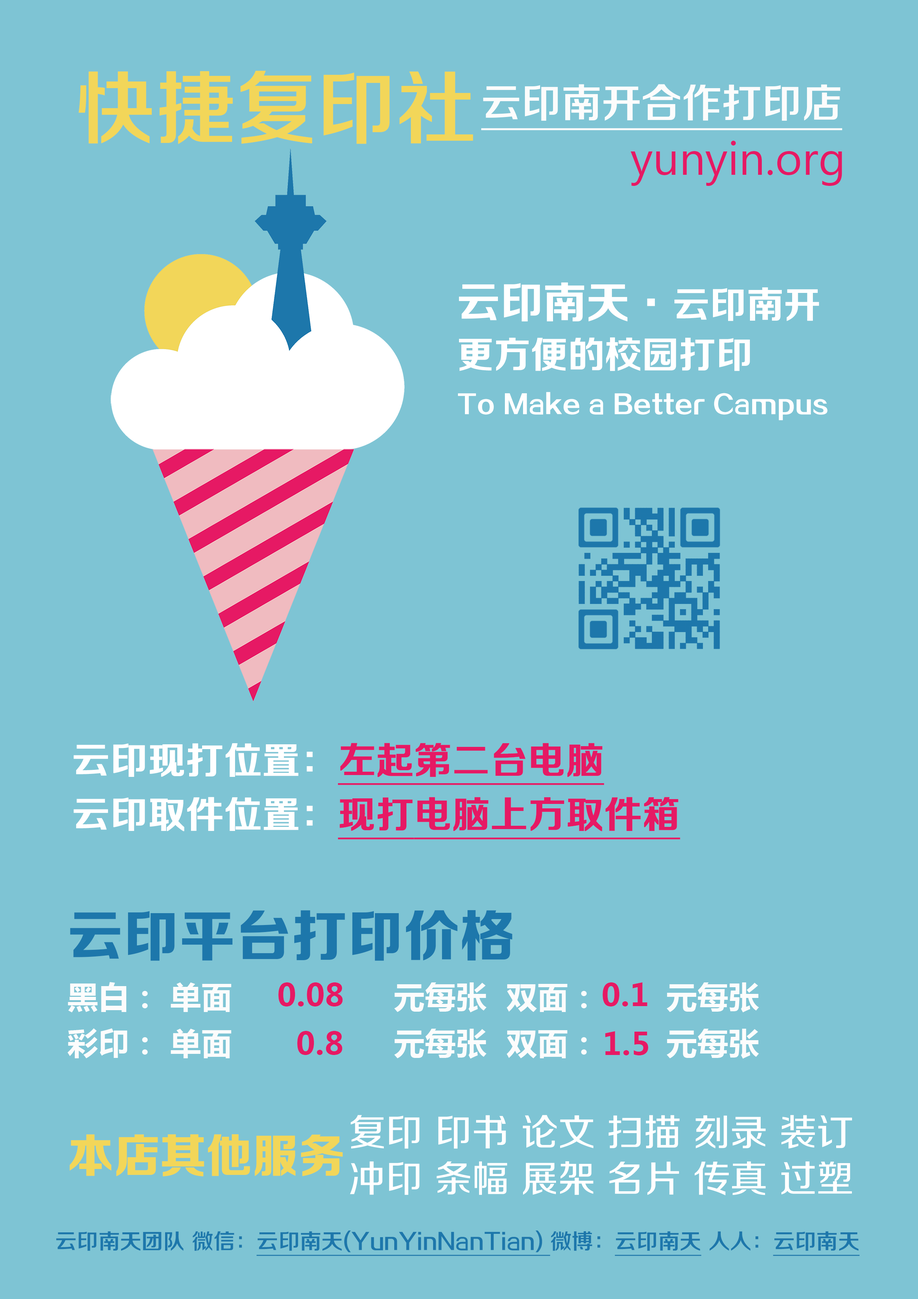
<style>
.page{position:relative;width:918px;height:1299px;background:#7ec4d4}
.page>*{position:absolute;margin:0}
.t1{font:80.2px "FZZZHONGJW--GB1-0";color:#f2d659}
.t2{font:40.1px "FZZZHONGJW--GB1-0";color:#fcfcfc;text-decoration:underline}
.t3{font:46.3px "KhmerUI";color:#e61964}
.t4{font:24.7px/55.5px "FZZCHJW--GB1-0";color:#ffffff}
.t5{font:43.2px/55.5px "FZZCHJW--GB1-0";color:#ffffff}
.t6{font:37px/55.5px "FZZCHJW--GB1-0";color:#ffffff}
.t7{font:37px "FZZZHONGJW--GB1-0";color:#ffffff;font-weight:bold}
.t8{font:37px "FZZZHONGJW--GB1-0";color:#e61964;font-weight:bold;text-decoration:underline}
.t9{font:30.9px "MicrosoftYaHei-Bold";letter-spacing:0.01em;color:#e61964}
.t10{font:37px/46.3px "FZZZHUNHJW--GB1-0";color:#ffffff}
.t11{font:46.3px "FZZDHJW--GB1-0";color:#f2d659}
.t12{font:21.6px "FZZZHONGJW--GB1-0";color:#1d77ab;text-decoration:underline}
.t13{font:21.6px "FZZZHONGJW--GB1-0";color:#1d77ab}
</style>
<div class="page">
<p class="t1" style="left:78px;top:71px;width:395px;height:73px">快捷复印社</p>
<p class="t2" style="left:481px;top:84px;width:362px;height:46px">云印南开合作打印店</p>
<p class="t3" style="left:630px;top:141px;width:212px;height:45px">yunyin.org</p>
<p class="t4" style="left:458px;top:282px;width:370px;height:138px"><span class="t5">云印南天·</span><span class="t6">云印南开<br>更方便的校园打印<br></span>To Make a Better Campus</p>
<p class="t7" style="left:74px;top:743px;width:530px;height:42px">云印现打位置：<span class="t8">左起第二台电脑</span></p>
<p class="t8" style="left:74px;top:797px;width:606px;height:42px"><span class="t7">云印取件位置：</span>现打电脑上方取件箱</p>
<p class="t9" style="left:278px;top:982px;width:65px;height:24px">0.08</p>
<p class="t9" style="left:603px;top:982px;width:45px;height:24px">0.1</p>
<p class="t9" style="left:297px;top:1031px;width:45px;height:24px">0.8</p>
<p class="t9" style="left:605px;top:1031px;width:43px;height:24px">1.5</p>
<p class="t10" style="left:350px;top:1115px;width:502px;height:80px">复印 印书 论文 扫描 刻录 装订  <br>冲印 条幅 展架 名片 传真 过塑</p>
<p class="t11" style="left:70px;top:1134px;width:273px;height:42px">本店其他服务</p>
<p class="t12" style="left:56px;top:1230px;width:804px;height:26px"><span class="t13">云印南天团队 微信：</span>云印南天(YunYinNanTian) <span class="t13">微博：</span>云印南天<span class="t13"> 人人：</span>云印南天</p>
</div>
